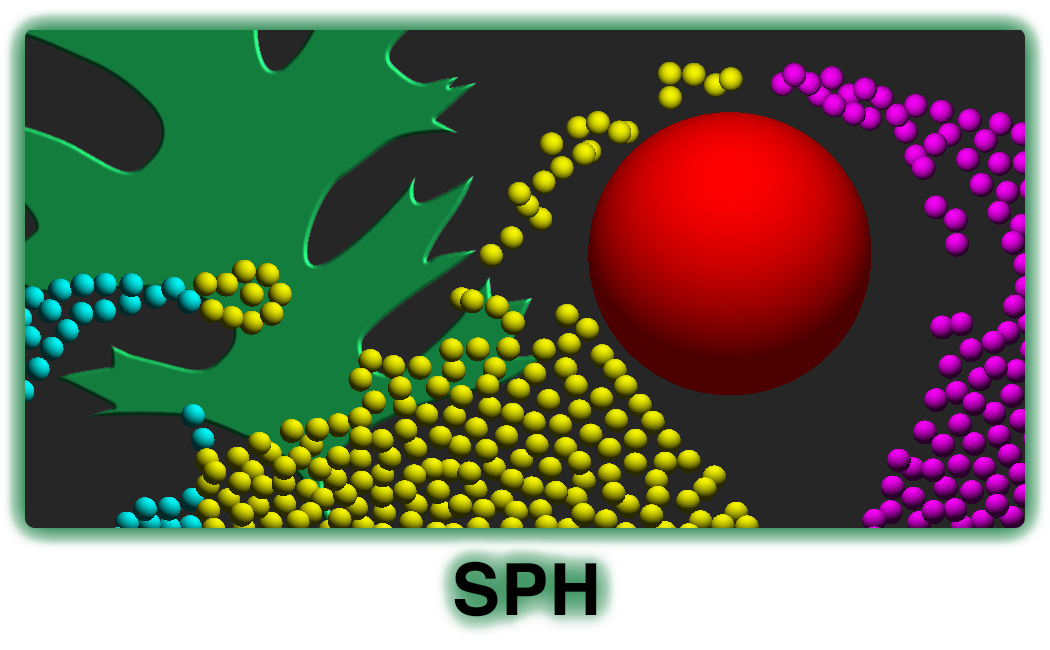
<style>
.page{position:relative;width:1050px;height:650px;background:#262626}
.page>*{position:absolute;margin:0}
.t1{font:72px "Helvetica-Bold";color:#000000}
</style>
<div class="page">
<p class="t1" style="left:454px;top:561px;width:143px;height:56px">SPH</p>
</div>
